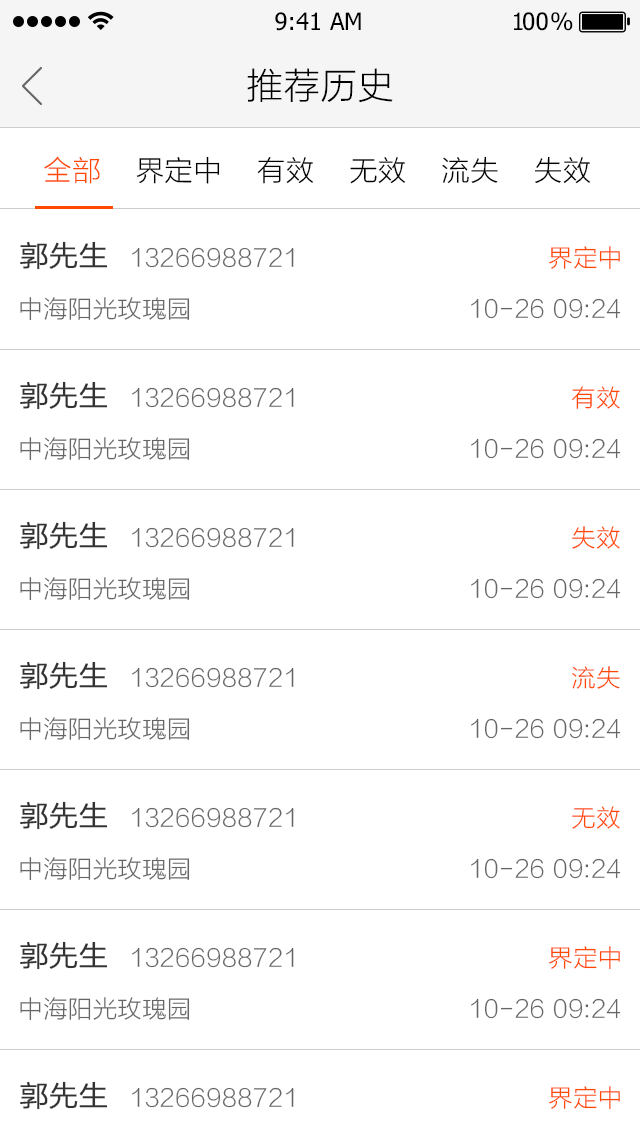
<style>
.page{position:relative;width:640px;height:1136px;background:#ffffff}
.page>*{position:absolute;margin:0}
.t1{font:24px "Tahoma";color:#000000}
.t2{font:24px "Tahoma";letter-spacing:-0.1em;color:#000000}
.t3{font:24px "Tahoma";letter-spacing:-0.25em;color:#000000}
.t4{font:36px "STHeitiSC-Light";color:#000000}
.t5{font:28px "STHeitiSC-Light";color:#000000}
.t6{font:28px "STHeitiSC-Light";color:#ff4800}
.t7{font:28px "STHeitiSC-Light";color:#333333;font-weight:bold}
.t8{font:24px "STHeitiSC-Light";color:#ff4800}
.t9{font:24px "STHeitiSC-Light";color:#666666}
</style>
<div class="page">
<p class="t1" style="left:275px;top:12px;width:86px;height:19px">9:41 AM</p>
<p class="t2" style="left:514px;top:12px;width:59px;height:19px">1<span class="t1">0</span><span class="t3">0 </span>%</p>
<p class="t4" style="left:247px;top:68px;width:146px;height:35px">推荐历史</p>
<p class="t5" style="left:44px;top:156px;width:547px;height:28px"><span class="t6">全部</span>    界定中    有效    无效    流失    失效</p>
<p class="t7" style="left:20px;top:241px;width:88px;height:29px">郭先生</p>
<p class="t8" style="left:549px;top:246px;width:71px;height:23px">界定中</p>
<p class="t9" style="left:132px;top:247px;width:162px;height:21px">13266988721</p>
<p class="t9" style="left:20px;top:297px;width:170px;height:24px">中海阳光玫瑰园</p>
<p class="t9" style="left:471px;top:298px;width:150px;height:21px">10-26 09:24</p>
<p class="t7" style="left:20px;top:381px;width:88px;height:29px">郭先生</p>
<p class="t9" style="left:132px;top:387px;width:162px;height:21px">13266988721</p>
<p class="t8" style="left:572px;top:386px;width:48px;height:23px">有效</p>
<p class="t9" style="left:20px;top:437px;width:170px;height:24px">中海阳光玫瑰园</p>
<p class="t9" style="left:471px;top:438px;width:150px;height:21px">10-26 09:24</p>
<p class="t7" style="left:20px;top:521px;width:88px;height:29px">郭先生</p>
<p class="t9" style="left:132px;top:527px;width:162px;height:21px">13266988721</p>
<p class="t8" style="left:572px;top:526px;width:48px;height:23px">失效</p>
<p class="t9" style="left:20px;top:577px;width:170px;height:24px">中海阳光玫瑰园</p>
<p class="t9" style="left:471px;top:578px;width:150px;height:21px">10-26 09:24</p>
<p class="t7" style="left:20px;top:661px;width:88px;height:29px">郭先生</p>
<p class="t9" style="left:132px;top:667px;width:162px;height:21px">13266988721</p>
<p class="t8" style="left:572px;top:666px;width:48px;height:23px">流失</p>
<p class="t9" style="left:20px;top:717px;width:170px;height:24px">中海阳光玫瑰园</p>
<p class="t9" style="left:471px;top:718px;width:150px;height:21px">10-26 09:24</p>
<p class="t7" style="left:20px;top:801px;width:88px;height:29px">郭先生</p>
<p class="t9" style="left:132px;top:807px;width:162px;height:21px">13266988721</p>
<p class="t8" style="left:572px;top:806px;width:48px;height:23px">无效</p>
<p class="t9" style="left:20px;top:857px;width:170px;height:24px">中海阳光玫瑰园</p>
<p class="t9" style="left:471px;top:858px;width:150px;height:21px">10-26 09:24</p>
<p class="t7" style="left:20px;top:941px;width:88px;height:29px">郭先生</p>
<p class="t9" style="left:132px;top:947px;width:162px;height:21px">13266988721</p>
<p class="t8" style="left:549px;top:946px;width:71px;height:23px">界定中</p>
<p class="t9" style="left:20px;top:997px;width:170px;height:24px">中海阳光玫瑰园</p>
<p class="t9" style="left:471px;top:998px;width:150px;height:21px">10-26 09:24</p>
<p class="t7" style="left:20px;top:1081px;width:88px;height:29px">郭先生</p>
<p class="t8" style="left:549px;top:1086px;width:71px;height:23px">界定中</p>
<p class="t9" style="left:132px;top:1087px;width:162px;height:21px">13266988721</p>
</div>
